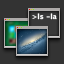
<style>
.page{position:relative;width:64px;height:64px;background:#333333}
.page>*{position:absolute;margin:0}
.t1{font:7px "LucidaGrande-Bold";color:#ffffff}
</style>
<div class="page">
<p class="t1" style="left:32px;top:13px;width:25px;height:7px">&gt;ls -la</p>
</div>
